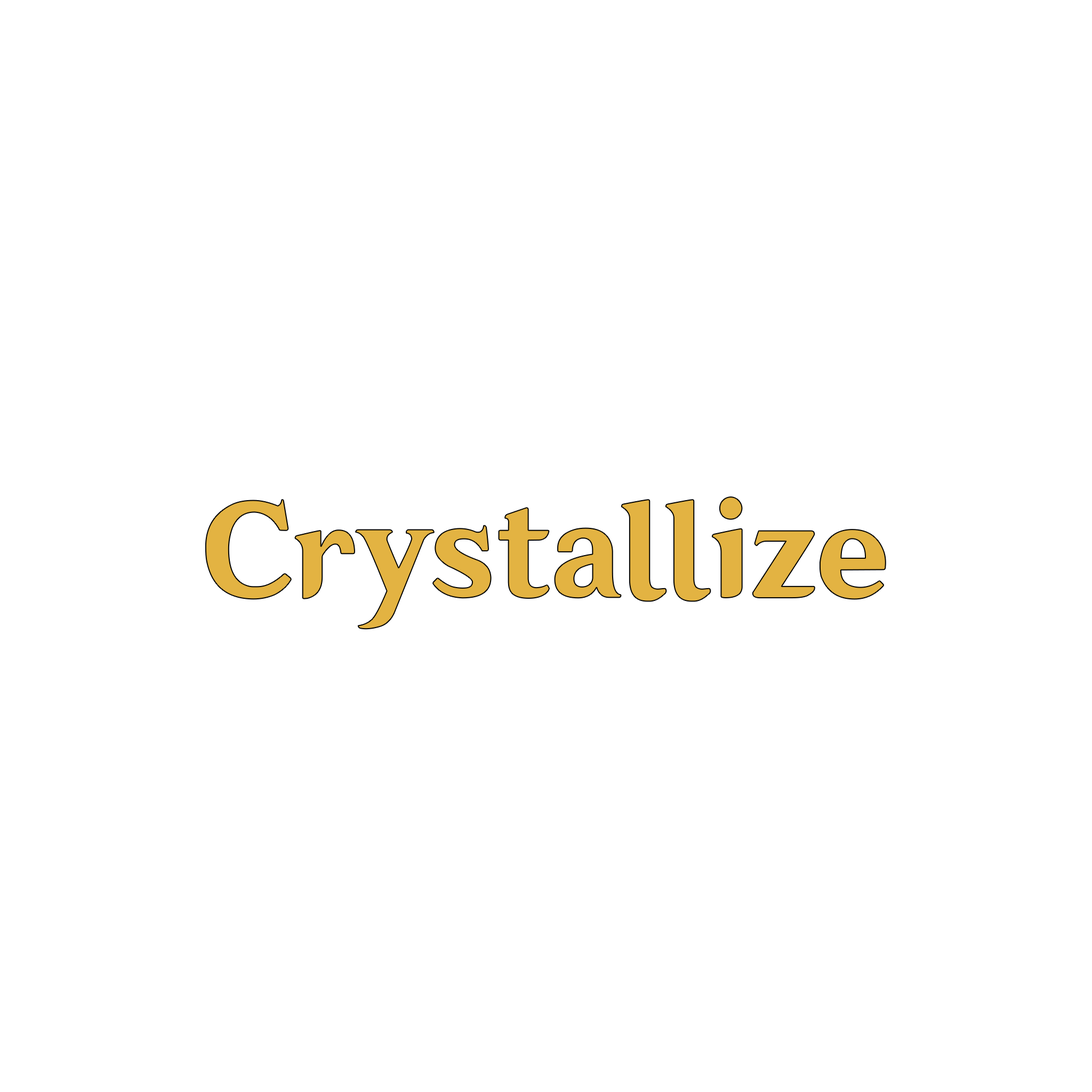
<style>
.page{position:relative;width:1092px;height:1092px;background:#ffffff}
.page>*{position:absolute;margin:0}
.t1{font:122.2px "Default_SC-85W";color:#e3b342}
</style>
<div class="page">
<p class="t1" style="left:205px;top:497px;width:681px;height:132px">Crystallize</p>
</div>
